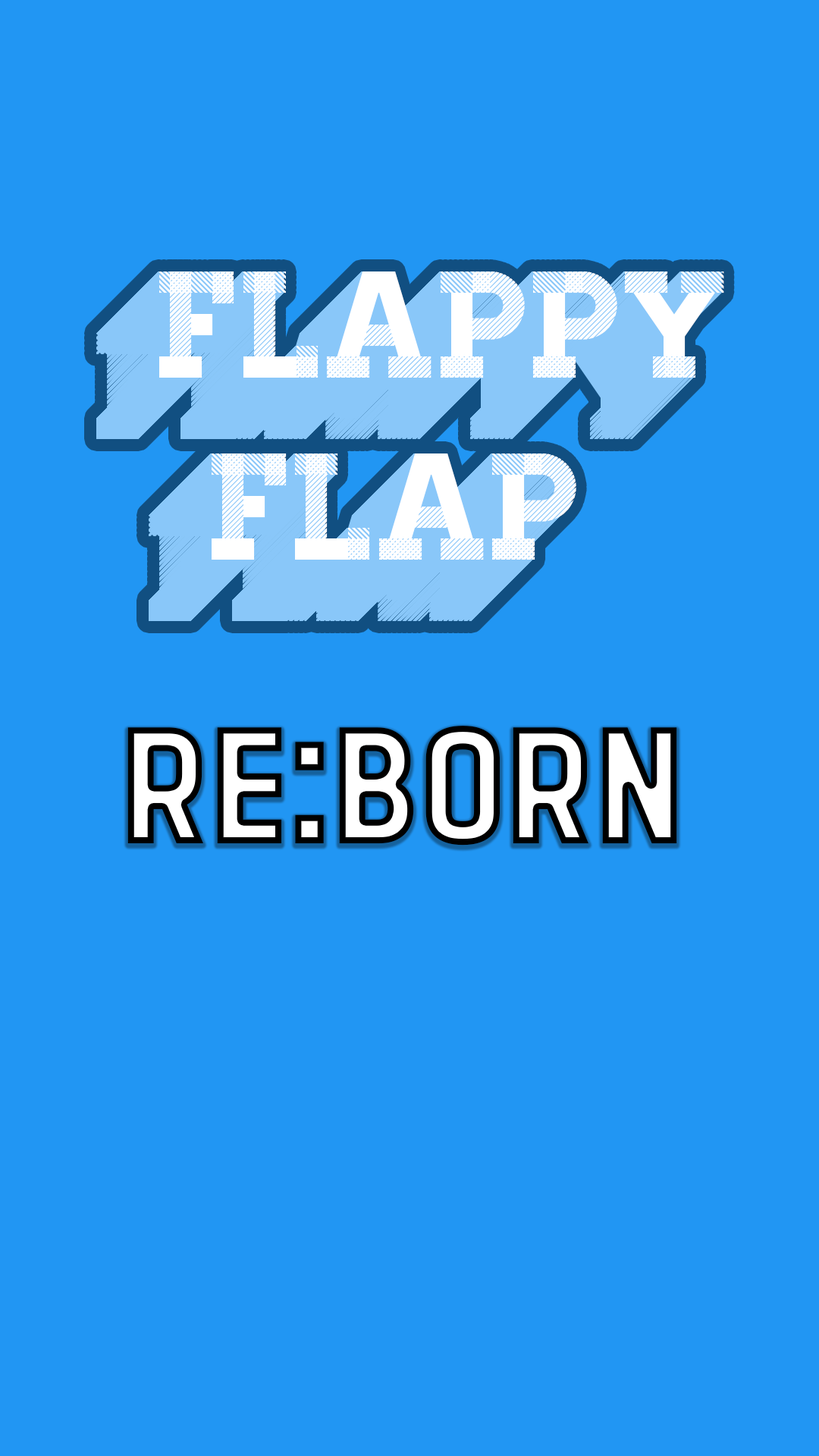
<style>
.page{position:relative;width:819px;height:1456px;background:#2196f3}
.page>*{position:absolute;margin:0}
.t1{font:151.7px "Homestead-Display";color:#ffffff}
.t2{font:151.7px "PROMINDER"}
</style>
<div class="page">
<p class="t1" style="left:159px;top:271px;width:565px;height:289px">Flappy<br> flap</p>
<p class="t2" style="left:127px;top:726px;width:550px;height:120px">RE:BORN</p>
</div>
